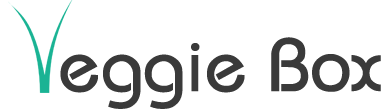
<style>
.page{position:relative;width:389px;height:110px;background:#ffffff}
.page>*{position:absolute;margin:0}
.t1{font:75px "Bauhaus";color:#3a3a3a}
</style>
<div class="page">
<p class="t1" style="left:60px;top:37px;width:321px;height:72px">eggie Box</p>
</div>
